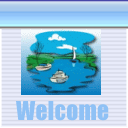
<style>
.page{position:relative;width:128px;height:128px}
.page>*{position:absolute;margin:0}
.t1{font:24px "Impact";color:#8fc1f5}
</style>
<div class="page">
<p class="t1" style="left:16px;top:101px;width:93px;height:20px">Welcome</p>
</div>
